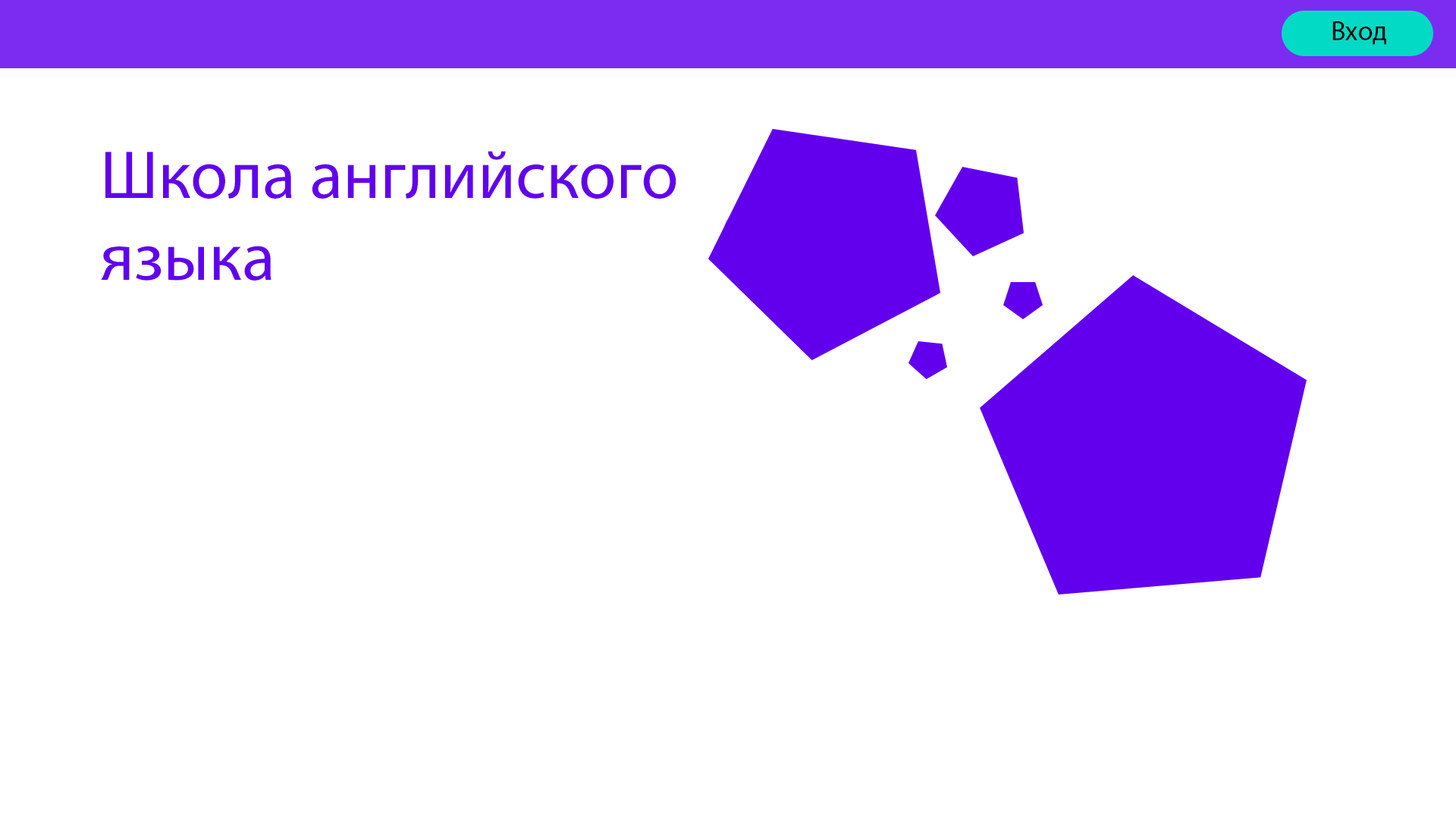
<style>
.page{position:relative;width:1456px;height:819px;background:#ffffff}
.page>*{position:absolute;margin:0}
.t1{font:27.3px "MyriadPro-Regular";color:#000000}
.t2{font:68.2px "MyriadPro-Regular";color:#6200ee}
</style>
<div class="page">
<p class="t1" style="left:1332px;top:21px;width:54px;height:24px">Вход</p>
<p class="t2" style="left:101px;top:151px;width:575px;height:130px">Школа английского <br>языка</p>
</div>
